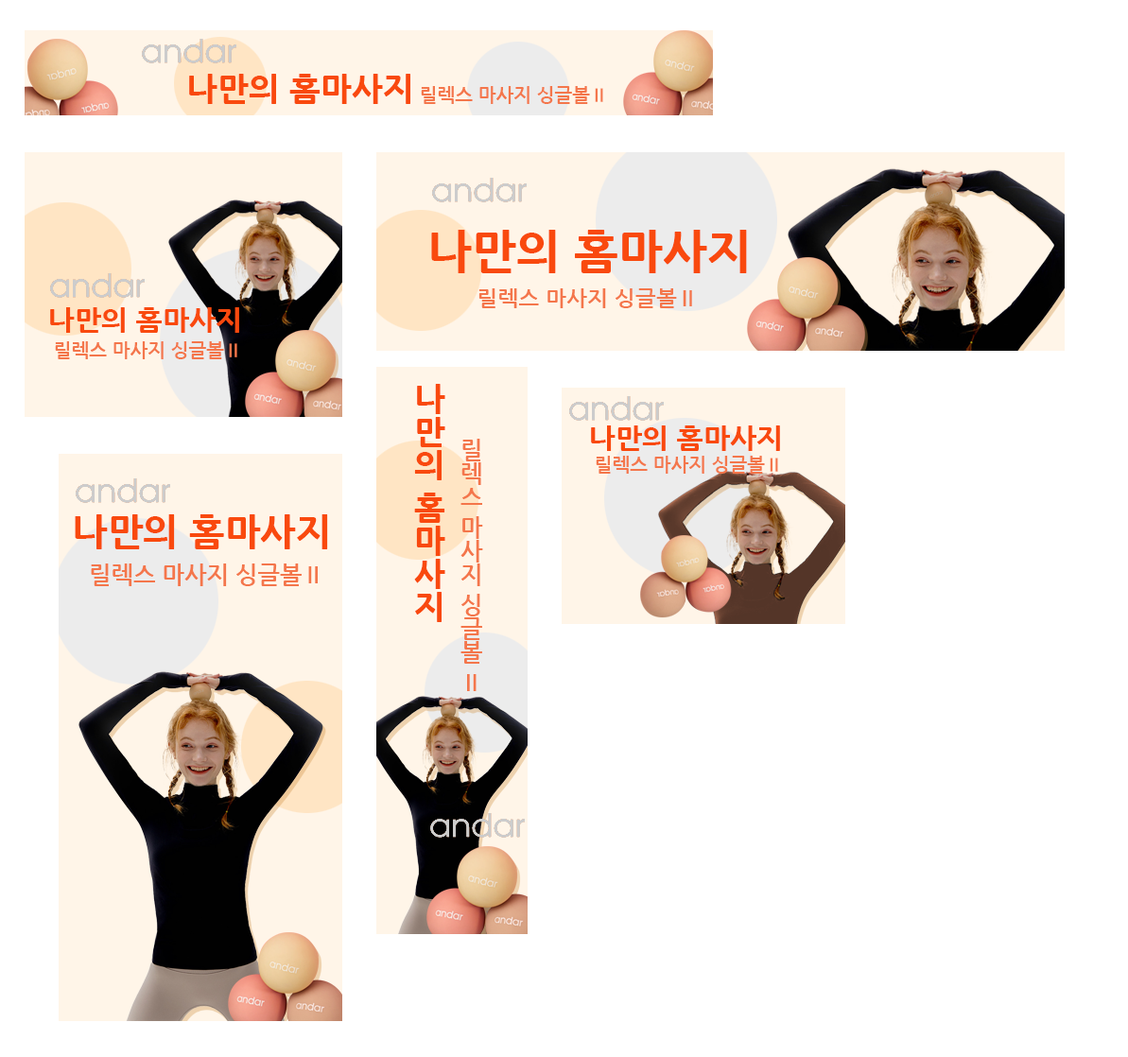
<style>
.page{position:relative;width:1128px;height:1057px;background:#ffffff}
.page>*{position:absolute;margin:0}
.t1{font:33.1px "NanumGothicExtraBold";color:#f9490e}
.t2{font:18.9px "NanumGothicBold";color:#f4764b}
.t3{font:47.3px "NanumGothicExtraBold";color:#f9490e}
.t4{font:22.2px "NanumGothicBold";color:#f4764b}
.t5{font:28.4px "NanumGothicExtraBold";color:#f9490e}
.t6{font:23.6px "NanumGothicBold";color:#f4764b}
.t7{font:37.8px "NanumGothicExtraBold";color:#f9490e}
</style>
<div class="page">
<p class="t1" style="left:189px;top:74px;width:221px;height:30px">나만의 홈마사지</p>
<p class="t2" style="left:421px;top:86px;width:182px;height:18px">릴렉스 마사지 싱글볼Ⅱ</p>
<p class="t3" style="left:431px;top:230px;width:316px;height:43px">나만의 홈마사지</p>
<p class="t4" style="left:478px;top:288px;width:214px;height:20px">릴렉스 마사지 싱글볼Ⅱ</p>
<p class="t5" style="left:50px;top:307px;width:189px;height:26px">나만의 홈마사지</p>
<p class="t2" style="left:55px;top:341px;width:182px;height:18px">릴렉스 마사지 싱글볼Ⅱ</p>
<p class="t1" style="left:414px;top:384px;width:31px;height:238px;text-align:center">나만의 홈마사지</p>
<p class="t5" style="left:591px;top:425px;width:189px;height:26px">나만의 홈마사지</p>
<p class="t6" style="left:460px;top:439px;width:23px;height:252px;text-align:center">릴렉스 마사지 싱글볼 Ⅱ</p>
<p class="t2" style="left:596px;top:456px;width:182px;height:18px">릴렉스 마사지 싱글볼Ⅱ</p>
<p class="t7" style="left:75px;top:514px;width:253px;height:35px">나만의 홈마사지</p>
<p class="t6" style="left:91px;top:564px;width:227px;height:22px">릴렉스 마사지 싱글볼Ⅱ</p>
</div>
